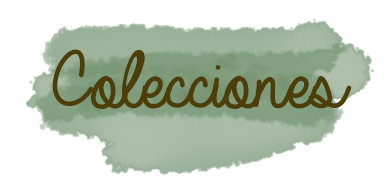
<style>
.page{position:relative;width:389px;height:193px;background:#ffffff}
.page>*{position:absolute;margin:0}
.t1{font:84.8px "AlwaysInMyHeart";color:#4c3e06;scale:1.04 1}
</style>
<div class="page">
<p class="t1" style="left:52px;top:49px;width:300px;height:60px">Colecciones</p>
</div>
